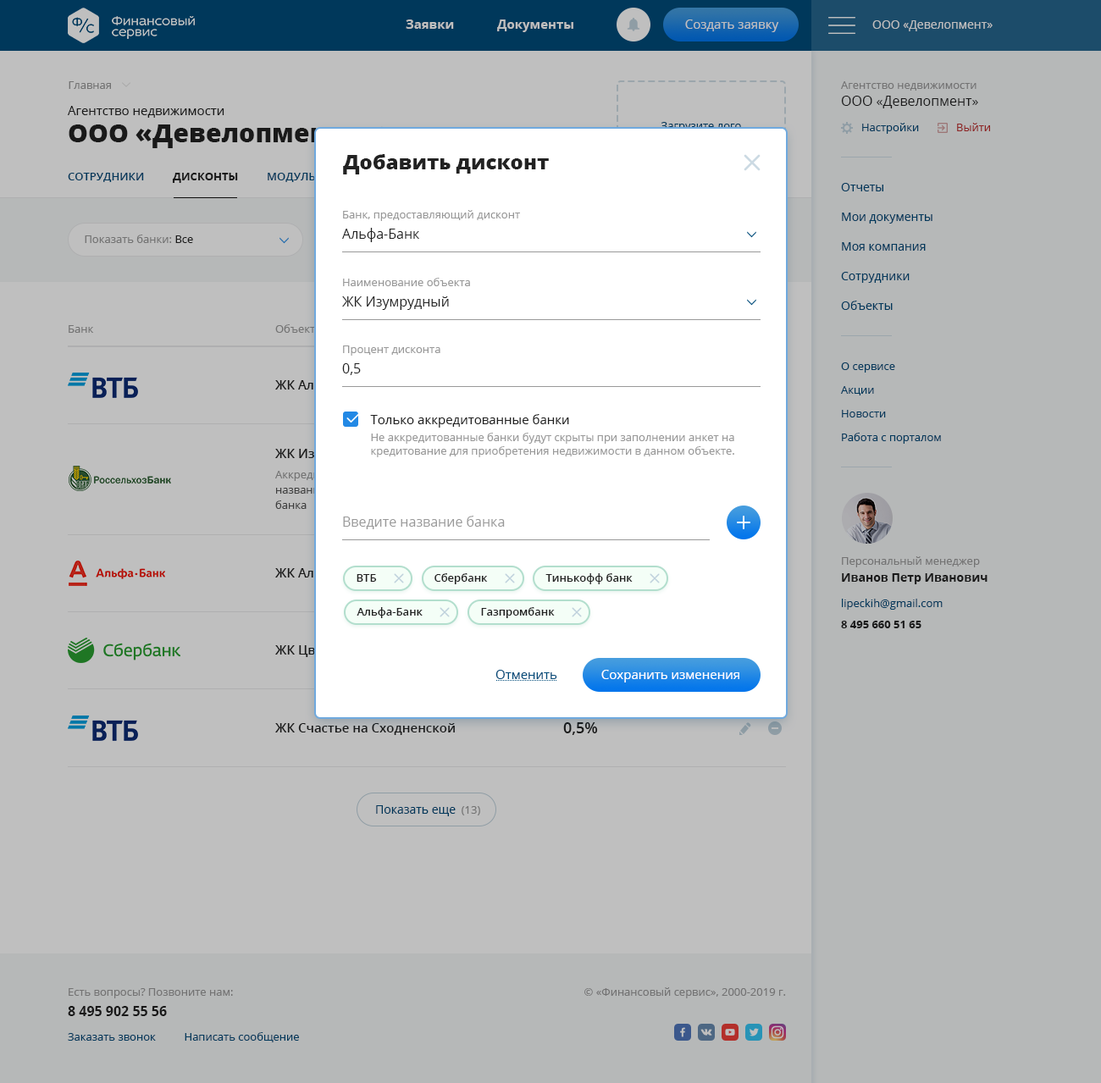
<style>
.page{position:relative;width:1101px;height:1083px;background:#b6b8b8}
.page>*{position:absolute;margin:0}
.t1{font:12.7px "OpenSans-Bold";color:#bfbfbf}
.t2{font:12.7px "OpenSans";color:#bfbfbf}
.t3{font:11.9px "OpenSans";color:#bfbfbf}
.t4{font:11px "OpenSans";color:#737373}
.t5{font:11px "OpenSans"}
.t6{font:13.5px/16.9px "OpenSans"}
.t7{font:12.7px "OpenSans";color:#222222}
.t8{font:25.4px "OpenSans-Extrabold";color:#222222}
.t9{font:20.3px "OpenSans-Extrabold";color:#222222}
.t10{font:11px "OpenSans-Semibold";text-transform:uppercase}
.t11{font:11px "OpenSans-Bold";text-transform:uppercase}
.t12{font:11.9px/29.6px "OpenSans";color:#00385b}
.t13{font:11px "OpenSans";color:#999999}
.t14{font:13.5px/20.3px "OpenSans";color:#222222}
.t15{font:11px/23.7px "OpenSans";color:#00385b}
.t16{font:12.7px "OpenSans-Semibold"}
.t17{font:11px/16.9px "OpenSans";color:#999999}
.t18{font:13.5px "OpenSans";color:#999999}
.t19{font:11.9px/16.9px "OpenSans-Bold";color:#222222}
.t20{font:11px "OpenSans-Semibold";color:#222222}
.t21{font:11px "OpenSans";color:#00385b}
.t22{font:11px "OpenSans-Bold";color:#222222}
.t23{font:12.7px "OpenSans";color:#004b7a}
.t24{font:12.7px "OpenSans";color:#ffffff}
.t25{font:12.7px "OpenSans-Semibold";color:#222222}
.t26{font:15.2px "OpenSans-Semibold";color:#222222}
.t27{font:11.9px "OpenSans";color:#00385b}
.t28{font:11px/20.3px "OpenSans"}
.t29{font:13.5px/20.3px "OpenSans-Bold"}
</style>
<div class="page">
<p class="t1" style="left:406px;top:19px;width:167px;height:13px">Заявки             Документы</p>
<p class="t2" style="left:685px;top:19px;width:94px;height:13px">Создать заявку</p>
<p class="t3" style="left:872px;top:20px;width:121px;height:11px">ООО «Девелопмент»</p>
<p class="t4" style="left:69px;top:81px;width:42px;height:8px">Главная</p>
<p class="t5" style="left:841px;top:81px;width:137px;height:27px">Агентство недвижимости<br><span class="t6">ООО «Девелопмент»</span></p>
<p class="t7" style="left:68px;top:106px;width:156px;height:12px">Агентство недвижимости</p>
<p class="t8" style="left:69px;top:124px;width:289px;height:24px">ООО «Девелопмент»</p>
<p class="t5" style="left:661px;top:122px;width:80px;height:10px">Загрузите лого</p>
<p class="t5" style="left:862px;top:123px;width:128px;height:11px">Настройки             Выйти</p>
<p class="t9" style="left:343px;top:154px;width:206px;height:20px">Добавить дисконт</p>
<p class="t10" style="left:68px;top:170px;width:299px;height:13px">Сотрудники          <span class="t11">Дисконты          </span>модуль на сайт</p>
<p class="t12" style="left:841px;top:183px;width:91px;height:127px">Отчеты<br>Мои документы<br>Моя компания<br>Сотрудники<br>Объекты</p>
<p class="t13" style="left:342px;top:210px;width:178px;height:32px">Банк, предоставляющий дисконт<br><span class="t14">Альфа-Банк</span></p>
<p class="t4" style="left:85px;top:235px;width:108px;height:8px">Показать банки: Все</p>
<p class="t13" style="left:342px;top:278px;width:128px;height:32px">Наименование объекта<br><span class="t14">ЖК Изумрудный</span></p>
<p class="t4" style="left:69px;top:325px;width:25px;height:8px">Банк</p>
<p class="t4" style="left:275px;top:324px;width:40px;height:9px">Объект</p>
<p class="t13" style="left:342px;top:346px;width:98px;height:29px">Процент дисконта<br><span class="t14">0,5</span></p>
<p class="t15" style="left:841px;top:362px;width:100px;height:82px">О сервисе<br>Акции<br>Новости<br>Работа с порталом</p>
<p class="t16" style="left:275px;top:380px;width:104px;height:13px">ЖК Алые паруса</p>
<p class="t17" style="left:370px;top:414px;width:364px;height:43px"><span class="t7">Только аккредитованные банки<br></span>Не аккредитованные банки будут скрыты при заполнении анкет на <span class="t13">кредитование для приобретения недвижимости в данном объекте.</span></p>
<p class="t18" style="left:343px;top:516px;width:162px;height:13px"><span class="t13"> <br></span>Введите название банка</p>
<p class="t13" style="left:842px;top:556px;width:145px;height:28px">Персональный менеджер<br><span class="t19">Иванов Петр Иванович</span></p>
<p class="t16" style="left:275px;top:568px;width:104px;height:13px">ЖК Алые паруса</p>
<p class="t20" style="left:357px;top:574px;width:20px;height:8px">ВТБ</p>
<p class="t20" style="left:434px;top:573px;width:54px;height:11px">Сбербанк</p>
<p class="t20" style="left:545px;top:573px;width:88px;height:11px">Тинькофф банк</p>
<p class="t21" style="left:842px;top:599px;width:101px;height:11px">lipeckih@gmail.com</p>
<p class="t20" style="left:357px;top:607px;width:66px;height:11px">Альфа-Банк</p>
<p class="t20" style="left:481px;top:607px;width:74px;height:11px">Газпромбанк</p>
<p class="t22" style="left:841px;top:621px;width:80px;height:7px">8 495 660 51 65</p>
<p class="t16" style="left:275px;top:645px;width:78px;height:12px">ЖК Цветной</p>
<p class="t23" style="left:495px;top:670px;width:62px;height:9px">Отменить</p>
<p class="t24" style="left:601px;top:670px;width:138px;height:13px">Сохранить изменения</p>
<p class="t25" style="left:275px;top:723px;width:180px;height:12px">ЖК Счастье на Сходненской</p>
<p class="t26" style="left:563px;top:722px;width:35px;height:13px">0,5%</p>
<p class="t27" style="left:376px;top:805px;width:104px;height:11px">Показать еще <span class="t21"> (13)</span></p>
<p class="t28" style="left:68px;top:988px;width:165px;height:28px">Есть вопросы? Позвоните нам:<br><span class="t29">8 495 902 55 56</span></p>
<p class="t4" style="left:584px;top:987px;width:202px;height:11px">© «Финансовый сервис», 2000-2019 г.</p>
<p class="t21" style="left:68px;top:1032px;width:231px;height:10px">Заказать звонок          Написать сообщение</p>
</div>
